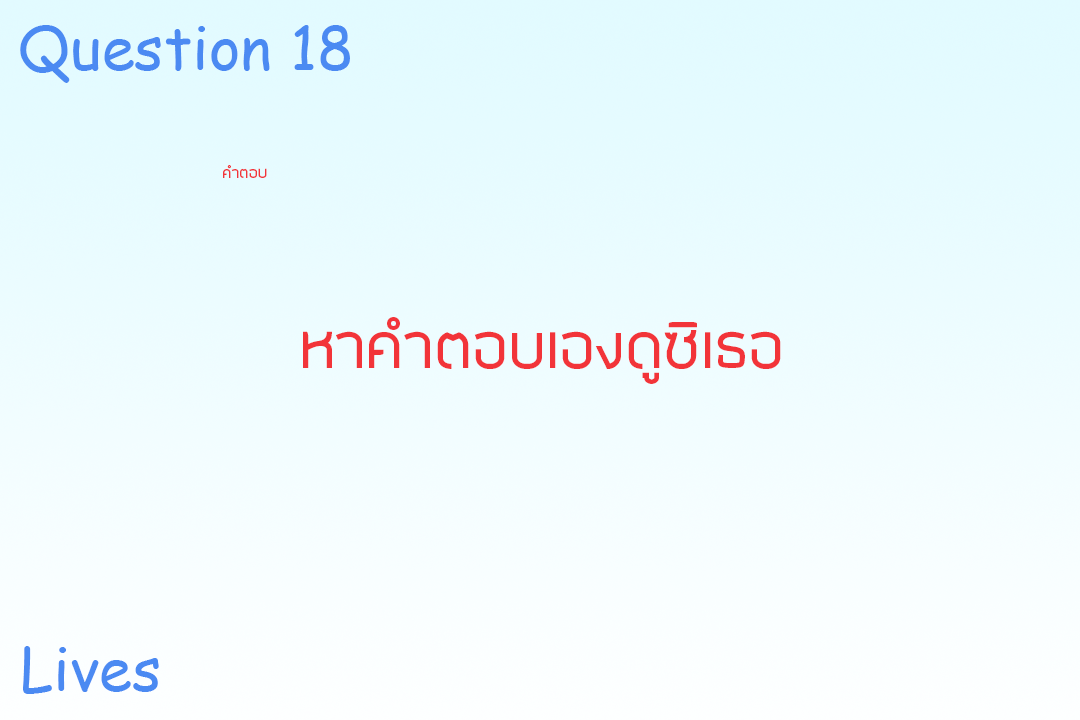
<style>
.page{position:relative;width:1080px;height:720px}
.page>*{position:absolute;margin:0}
.t1{font:60px "ComicSansMS";color:#4b8af2}
.t2{font:18px "SuperspaceRegular";color:#f23439}
.t3{font:72px "SuperspaceRegular";color:#f23439}
.t4{font:59.6px "ComicSansMS";color:#4b8af2}
</style>
<div class="page">
<p class="t1" style="left:20px;top:25px;width:330px;height:58px">Question 18</p>
<p class="t2" style="left:223px;top:165px;width:44px;height:13px">คำตอบ</p>
<p class="t3" style="left:303px;top:317px;width:478px;height:67px">หาคำตอบเองดูซิเธอ</p>
<p class="t4" style="left:23px;top:646px;width:136px;height:48px">Lives</p>
</div>
